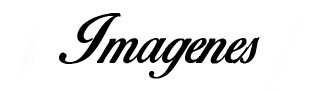
<style>
.page{position:relative;width:331px;height:91px;background:#ffffff}
.page>*{position:absolute;margin:0}
.t1{font:60px "BirdsofParadise";color:#000000}
</style>
<div class="page">
<p class="t1" style="left:59px;top:13px;width:201px;height:66px">Imagenes</p>
</div>
